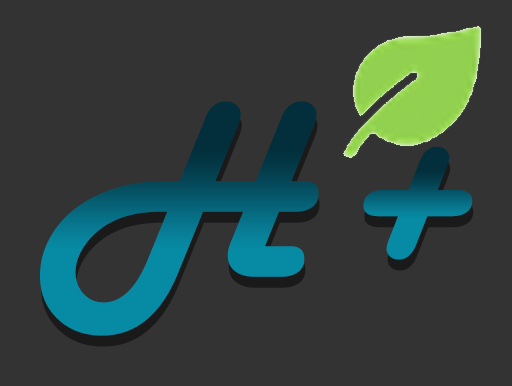
<style>
.page{position:relative;width:512px;height:386px;background:#333333}
.page>*{position:absolute;margin:0}
.t1{font:260px "HarlowSolid"}
.t2{font:260px "HarlowSolid";scale:0.96 1}
</style>
<div class="page">
<p class="t1" style="left:40px;top:101px;width:279px;height:235px">H</p>
<p class="t2" style="left:363px;top:146px;width:110px;height:114px">+</p>
</div>
